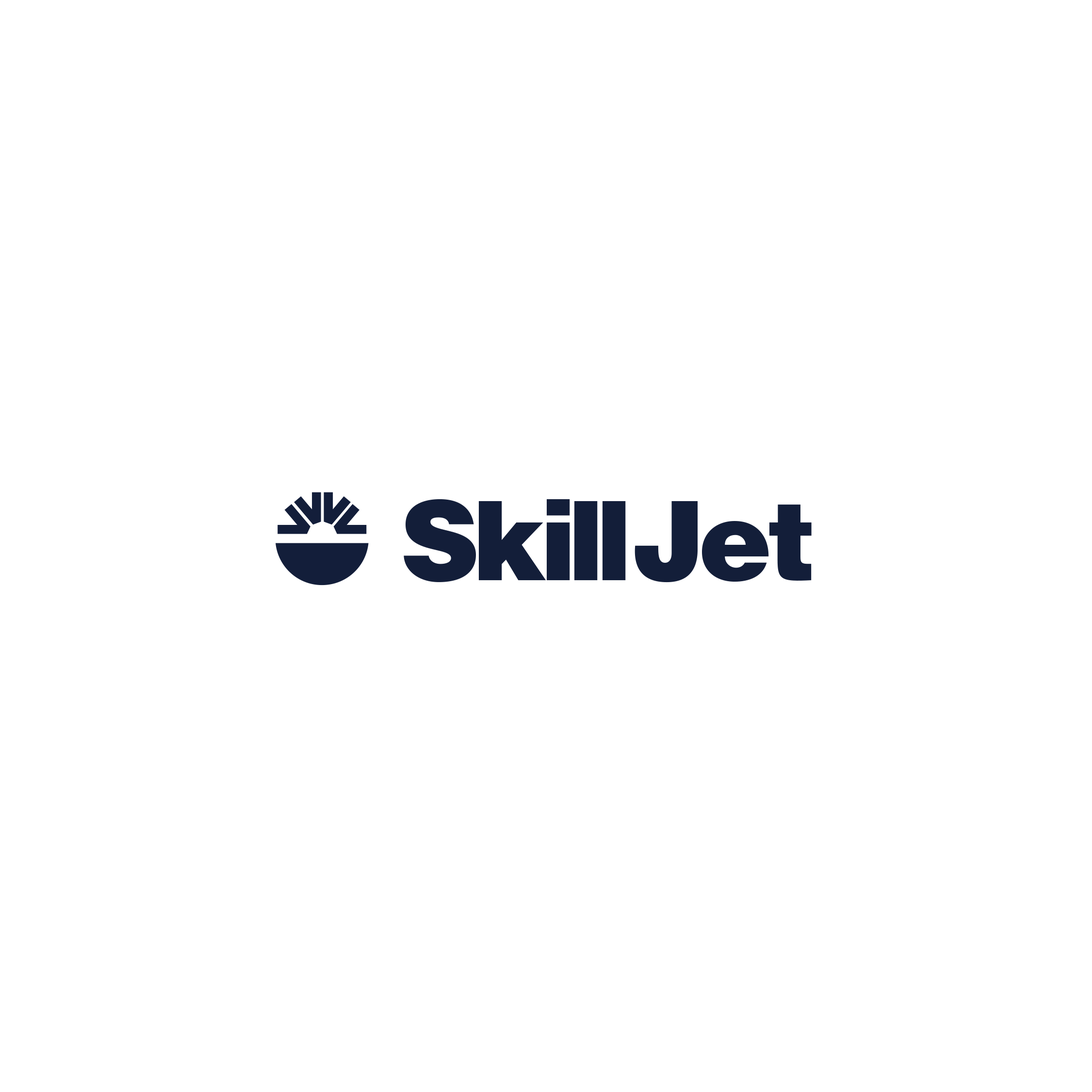
<style>
.page{position:relative;width:1092px;height:1092px;background:#ffffff}
.page>*{position:absolute;margin:0}
.t1{font:109.9px "Helvetica-Black";color:#131e3a}
</style>
<div class="page">
<p class="t1" style="left:404px;top:499px;width:408px;height:84px">SkillJet</p>
</div>
